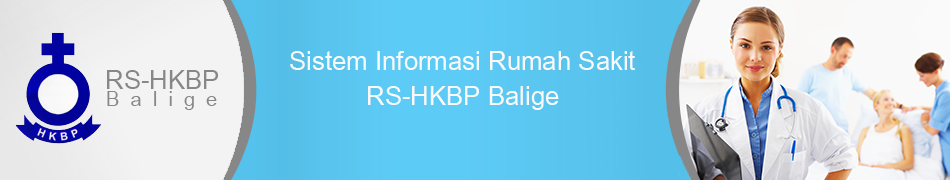
<style>
.page{position:relative;width:950px;height:180px}
.page>*{position:absolute;margin:0}
.t1{font:36px "Utsaah";color:#f9f9f8}
.t2{font:36px "Utsaah";color:#878787}
.t3{font:28px "Utsaah";color:#878787}
</style>
<div class="page">
<p class="t1" style="left:290px;top:51px;width:345px;height:19px">Sistem Informasi Rumah Sakit</p>
<p class="t2" style="left:107px;top:70px;width:111px;height:19px">RS-HKBP</p>
<p class="t1" style="left:368px;top:86px;width:191px;height:24px">RS-HKBP Balige</p>
<p class="t3" style="left:107px;top:91px;width:110px;height:19px">B  a  l  i  g  e</p>
</div>
